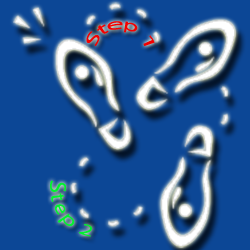
<style>
.page{position:relative;width:250px;height:250px;background:#0c4796}
.page>*{position:absolute;margin:0}
.t1{font:16px "MyriadPro-Regular";color:#f30000}
.t2{font:18.7px "MyriadPro-Regular";color:#00f32e}
</style>
<div class="page">
<p class="t1" style="left:86px;top:21px;width:69px;height:26px;rotate:3deg">Step 1</p>
<p class="t2" style="left:50px;top:180px;width:42px;height:57px;rotate:56deg">Step 2</p>
</div>
